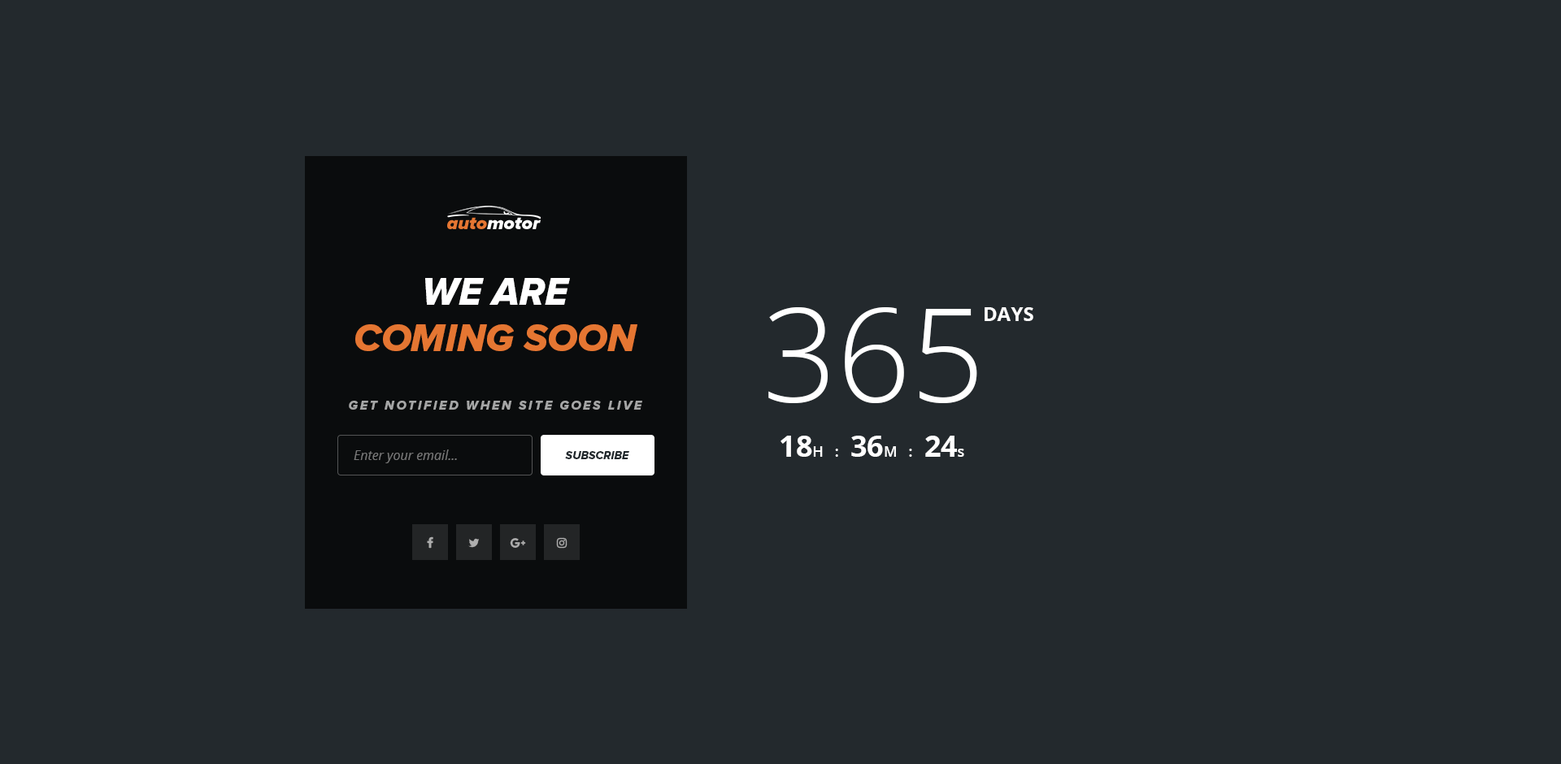
<style>
.page{position:relative;width:1561px;height:764px;background:#23292d}
.page>*{position:absolute;margin:0}
.t1{font:39px "ProximaNova-ExtrabldIt";color:#e57632;text-transform:uppercase}
.t2{font:39px "ProximaNova-ExtrabldIt";color:#ffffff;text-transform:uppercase}
.t3{font:130.1px "OpenSans-Light";color:#ffffff;text-transform:uppercase}
.t4{font:19.5px "OpenSans-Bold";color:#ffffff;text-transform:uppercase}
.t5{font:13px "ProximaNova-ExtrabldIt";letter-spacing:0.16em;color:#a5a6a6;text-transform:uppercase}
.t6{font:14.6px "OpenSans-Semibold";color:#ffffff}
.t7{font:29.3px "OpenSans-Bold";color:#ffffff}
.t8{font:13px "OpenSans-Italic";color:#787878}
.t9{font:11.4px "ProximaNova-ExtrabldIt";color:#22292d;text-transform:uppercase}
</style>
<div class="page">
<p class="t1" style="left:355px;top:278px;width:282px;height:73px;text-align:center"><span class="t2">we are<br></span>coming soon</p>
<p class="t3" style="left:768px;top:307px;width:209px;height:96px">365</p>
<p class="t4" style="left:984px;top:307px;width:49px;height:14px">days</p>
<p class="t5" style="left:349px;top:401px;width:293px;height:9px">get notified when site goes live</p>
<p class="t6" style="left:780px;top:436px;width:184px;height:21px"><span class="t7">18</span>H   :   <span class="t7">36</span>M   :   <span class="t7">24</span>s</p>
<p class="t8" style="left:354px;top:449px;width:103px;height:14px">Enter your email...</p>
<p class="t9" style="left:565px;top:451px;width:64px;height:8px">subscribe</p>
</div>
